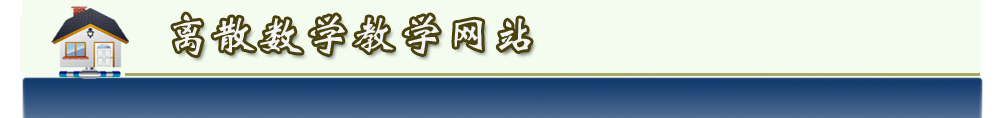
<style>
.page{position:relative;width:1003px;height:118px;background:#f4fcef}
.page>*{position:absolute;margin:0}
.t1{font:43.2px "CTWeiBeiSJ";letter-spacing:0.1em;color:#f3f5f7}
</style>
<div class="page">
<p class="t1" style="left:173px;top:14px;width:358px;height:41px">离散数学教学网站</p>
</div>
